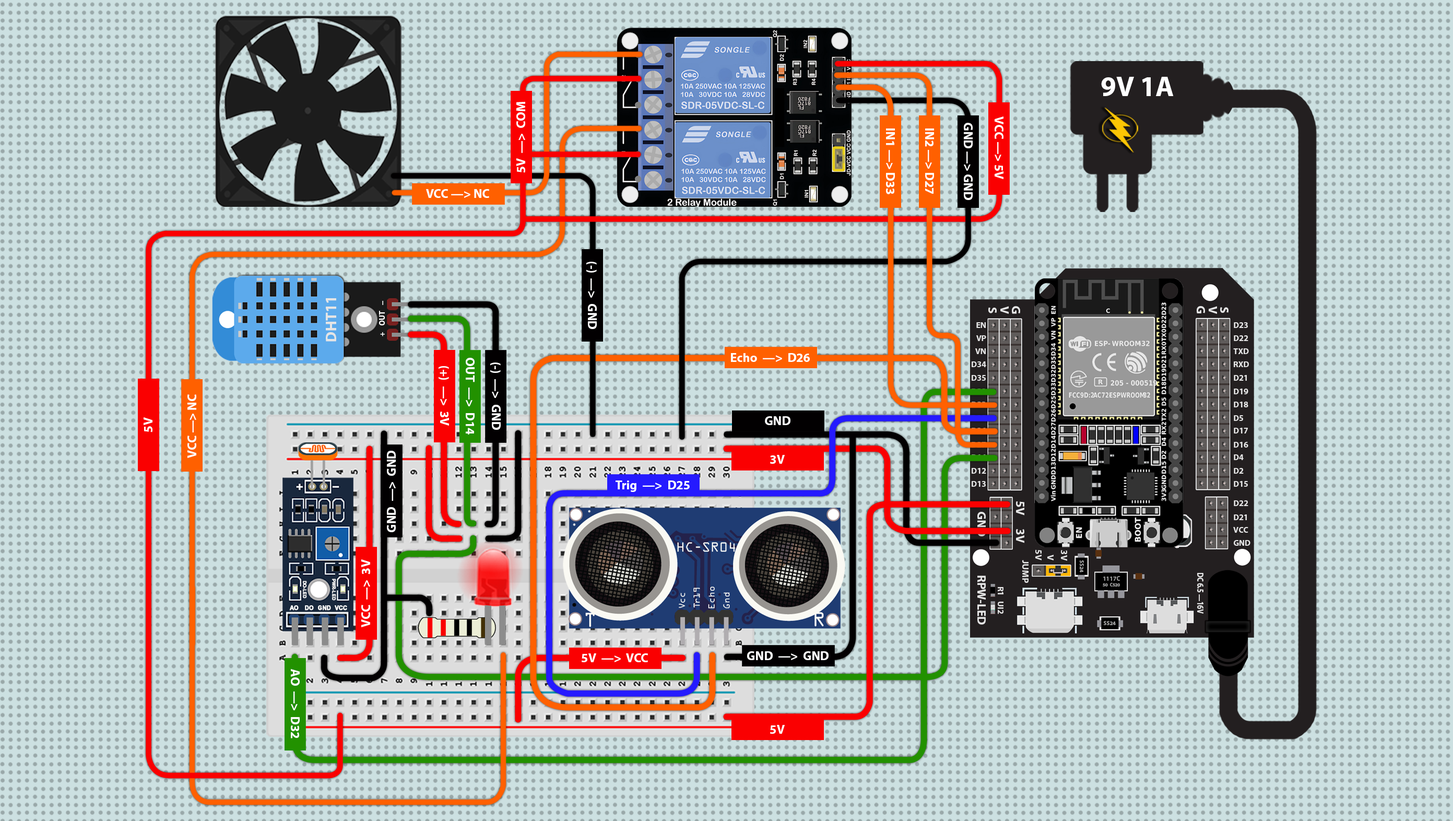
<style>
.page{position:relative;width:1453px;height:821px;background:#cce0e1}
.page>*{position:absolute;margin:0}
.t1{font:28.2px "MyriadPro-Bold";color:#ffffff}
.t2{font:21.6px "MyriadPro-Bold";color:#ffffff}
.t3{font:26.6px "MyriadPro-Bold";color:#e5e5e5}
.t4{font:13.6px "MyriadPro-Bold";color:#ffffff;scale:2.01 1}
.t5{font:21.2px "MyriadPro-Bold";color:#e5e5e5}
.t6{font:13.6px "MyriadPro-Bold";color:#ffffff;scale:0.95 1}
.t7{font:14.4px "MyriadPro-Bold";color:#e5e5e5}
.t8{font:15.6px "MyriadPro-Bold";color:#e5e5e5}
.t9{font:9.6px "MyriadPro-Bold";color:#9f9f9f}
.t10{font:4.7px "Arial-BoldMT";color:#ffffff;font-weight:bold;scale:0.95 1}
.t11{font:8.3px/6.6px "MyriadPro-Bold";color:#9f9f9f;scale:0.96 1}
.t12{font:11px/6.6px "MyriadPro-Bold";color:#9f9f9f;scale:0.96 1}
.t13{font:15.6px "MyriadPro-Bold";color:#e5e5e5;scale:0.78 1}
.t14{font:6.5px "Arial-BoldMT";color:#ffffff;font-weight:bold;scale:0.89 1}
</style>
<div class="page">
<p class="t1" style="left:1101px;top:77px;width:73px;height:19px">9V 1A</p>
<p class="t2" style="left:516px;top:102px;width:9px;height:71px;rotate:-90deg">5V  —&gt;  COM</p>
<p class="t2" style="left:964px;top:123px;width:9px;height:77px;rotate:90deg">GND —&gt; GND</p>
<p class="t2" style="left:995px;top:116px;width:8px;height:63px;rotate:90deg">VCC —&gt; 5V</p>
<p class="t2" style="left:886px;top:128px;width:9px;height:66px;rotate:90deg">IN1 —&gt; D33</p>
<p class="t2" style="left:925px;top:128px;width:9px;height:66px;rotate:90deg">IN2 —&gt; D27</p>
<p class="t2" style="left:426px;top:189px;width:63px;height:9px">VCC —&gt; NC</p>
<p class="t2" style="left:586px;top:262px;width:11px;height:67px;rotate:90deg">(-)  —&gt;  GND</p>
<p class="t3" style="left:326px;top:298px;width:10px;height:43px;rotate:-90deg">DHT11</p>
<p class="t4" style="left:382px;top:301px;width:1px;height:4px;rotate:-90deg">-</p>
<p class="t5" style="left:1000px;top:306px;width:9px;height:8px;rotate:90deg">V</p>
<p class="t5" style="left:1012px;top:306px;width:8px;height:8px;rotate:90deg">G</p>
<p class="t5" style="left:1197px;top:306px;width:8px;height:7px;rotate:90deg">G</p>
<p class="t5" style="left:1209px;top:306px;width:8px;height:8px;rotate:90deg">V</p>
<p class="t6" style="left:379px;top:311px;width:6px;height:14px;rotate:-90deg">OUT</p>
<p class="t5" style="left:988px;top:307px;width:9px;height:6px;rotate:90deg">S</p>
<p class="t5" style="left:1220px;top:307px;width:8px;height:6px;rotate:90deg">S</p>
<p class="t7" style="left:976px;top:322px;width:10px;height:6px">EN</p>
<p class="t7" style="left:1234px;top:322px;width:14px;height:6px">D23</p>
<p class="t6" style="left:380px;top:332px;width:5px;height:4px;rotate:-90deg">+</p>
<p class="t7" style="left:976px;top:335px;width:10px;height:6px">VP</p>
<p class="t7" style="left:1234px;top:335px;width:14px;height:6px">D22</p>
<p class="t2" style="left:731px;top:353px;width:79px;height:9px">Echo  —&gt;  D26</p>
<p class="t7" style="left:975px;top:348px;width:11px;height:6px">VN</p>
<p class="t7" style="left:1233px;top:348px;width:16px;height:6px">TXD</p>
<p class="t2" style="left:439px;top:366px;width:10px;height:59px;rotate:90deg">(+)  —&gt;  3V</p>
<p class="t2" style="left:466px;top:358px;width:9px;height:76px;rotate:90deg">OUT  —&gt;  D14</p>
<p class="t2" style="left:490px;top:362px;width:11px;height:68px;rotate:90deg">(-)  —&gt;  GND</p>
<p class="t7" style="left:972px;top:361px;width:14px;height:6px">D34</p>
<p class="t7" style="left:1234px;top:361px;width:15px;height:6px">RXD</p>
<p class="t7" style="left:972px;top:375px;width:14px;height:6px">D35</p>
<p class="t7" style="left:1234px;top:375px;width:13px;height:6px">D21</p>
<p class="t7" style="left:1234px;top:388px;width:14px;height:6px">D19</p>
<p class="t2" style="left:187px;top:394px;width:9px;height:64px;rotate:-90deg">VCC —&gt; NC</p>
<p class="t7" style="left:1234px;top:401px;width:14px;height:6px">D18</p>
<p class="t2" style="left:144px;top:417px;width:8px;height:15px;rotate:-90deg">5V</p>
<p class="t2" style="left:765px;top:416px;width:25px;height:9px">GND</p>
<p class="t7" style="left:1234px;top:415px;width:9px;height:6px">D5</p>
<p class="t7" style="left:1234px;top:428px;width:14px;height:5px">D17</p>
<p class="t7" style="left:1234px;top:442px;width:14px;height:5px">D16</p>
<p class="t2" style="left:387px;top:451px;width:9px;height:81px;rotate:-90deg">GND  —&gt;  GND</p>
<p class="t2" style="left:770px;top:455px;width:15px;height:9px">3V</p>
<p class="t7" style="left:1234px;top:454px;width:10px;height:6px">D4</p>
<p class="t7" style="left:972px;top:468px;width:14px;height:6px">D12</p>
<p class="t7" style="left:1234px;top:468px;width:10px;height:6px">D2</p>
<p class="t2" style="left:616px;top:480px;width:74px;height:12px">Trig  —&gt;  D25</p>
<p class="t7" style="left:972px;top:481px;width:14px;height:6px">D13</p>
<p class="t7" style="left:1234px;top:481px;width:14px;height:6px">D15</p>
<p class="t5" style="left:1016px;top:501px;width:8px;height:14px;rotate:90deg">5V</p>
<p class="t7" style="left:1234px;top:500px;width:14px;height:6px">D22</p>
<p class="t5" style="left:977px;top:512px;width:9px;height:24px;rotate:90deg">GND</p>
<p class="t7" style="left:1234px;top:514px;width:13px;height:6px">D21</p>
<p class="t5" style="left:1016px;top:529px;width:8px;height:14px;rotate:90deg">3V</p>
<p class="t7" style="left:1233px;top:527px;width:15px;height:6px">VCC</p>
<p class="t7" style="left:1234px;top:540px;width:16px;height:6px">GND</p>
<p class="t8" style="left:1035px;top:549px;width:7px;height:11px;rotate:90deg">5V</p>
<p class="t8" style="left:1047px;top:554px;width:7px;height:6px;rotate:90deg">V</p>
<p class="t8" style="left:1061px;top:550px;width:6px;height:11px;rotate:90deg">3V</p>
<p class="t2" style="left:361px;top:559px;width:9px;height:68px;rotate:-90deg">VCC  —&gt;  3V</p>
<p class="t8" style="left:1022px;top:560px;width:6px;height:23px;rotate:90deg">JUMP</p>
<p class="t9" style="left:1080px;top:560px;width:4px;height:12px;rotate:90deg">SS24</p>
<p class="t10" style="left:303px;top:581px;width:4px;height:17px;rotate:90deg">DO-LED</p>
<p class="t10" style="left:332px;top:578px;width:4px;height:22px;rotate:90deg">PWR-LED</p>
<p class="t5" style="left:977px;top:575px;width:9px;height:49px;rotate:90deg">RPW-LED</p>
<p class="t11" style="left:1103px;top:576px;width:17px;height:10px;text-align:center"><span class="t12">1117C<br></span>50  C520</p>
<p class="t13" style="left:1197px;top:573px;width:6px;height:40px;rotate:90deg">DC 6.5 —16V</p>
<p class="t7" style="left:998px;top:587px;width:5px;height:7px;rotate:90deg">R1</p>
<p class="t14" style="left:289px;top:605px;width:10px;height:5px">AO</p>
<p class="t14" style="left:305px;top:605px;width:9px;height:5px">DO</p>
<p class="t14" style="left:318px;top:605px;width:13px;height:5px">GND</p>
<p class="t14" style="left:335px;top:605px;width:12px;height:5px">VCC</p>
<p class="t7" style="left:998px;top:601px;width:5px;height:13px;rotate:90deg">UI2</p>
<p class="t9" style="left:1104px;top:621px;width:12px;height:4px">SS24</p>
<p class="t2" style="left:582px;top:653px;width:66px;height:9px">5V  —&gt;  VCC</p>
<p class="t2" style="left:747px;top:651px;width:82px;height:9px">GND  —&gt;  GND</p>
<p class="t2" style="left:291px;top:669px;width:9px;height:69px;rotate:90deg">AO  —&gt;  D32</p>
<p class="t2" style="left:770px;top:725px;width:15px;height:9px">5V</p>
</div>
